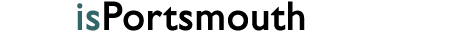
<style>
.page{position:relative;width:450px;height:32px;background:#ffffff}
.page>*{position:absolute;margin:0}
.t1{font:40.3px "GillSans";color:#000000;font-weight:bold}
.t2{font:40.3px "GillSans";color:#ffffff;font-weight:bold}
.t3{font:40.3px "GillSans";color:#336666;font-weight:bold}
</style>
<div class="page">
<p class="t1" style="left:2px;top:1px;width:303px;height:30px"><span class="t2">This</span><span class="t3">is</span>Portsmouth</p>
</div>
